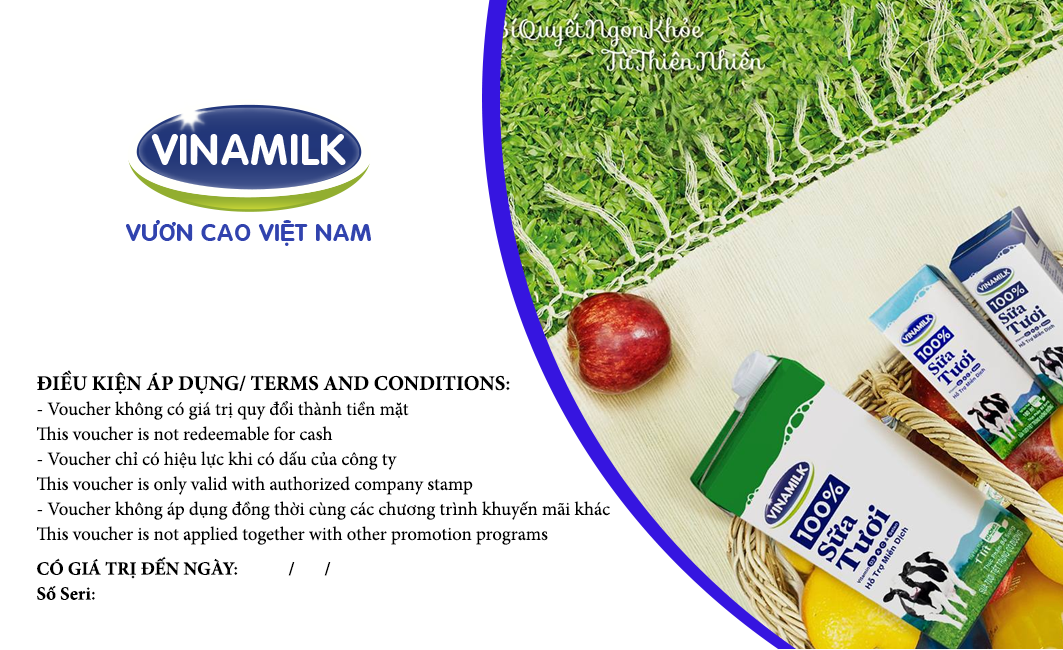
<style>
.page{position:relative;width:1063px;height:650px;background:#ffffff}
.page>*{position:absolute;margin:0}
.t1{font:18.8px/25px "MinionPro-Regular";color:#000000}
.t2{font:20.8px "MinionPro-Bold";color:#000000}
.t3{font:18.8px/29.2px "MinionPro-Bold";color:#000000}
.t4{font:18.8px/25px "MinionPro-Bold";color:#000000}
</style>
<div class="page">
<p class="t1" style="left:36px;top:370px;width:574px;height:230px"><span class="t2">ĐIỀU KIỆN ÁP DỤNG/ TERMS AND CONDITIONS:<br></span>- Voucher không có giá trị quy đổi thành tiền mặt<br>This voucher is not redeemable for cash<br>- Voucher chỉ có hiệu lực khi có dấu của công ty<br>This voucher is only valid with authorized company stamp<br>- Voucher không áp dụng đồng thời cùng các chương trình khuyến mãi khác<br>This voucher is not applied together with other promotion programs<br><span class="t3">CÓ GIÁ TRỊ ĐẾN NGÀY:  / /<br></span><span class="t4">Số Seri:</span></p>
</div>
